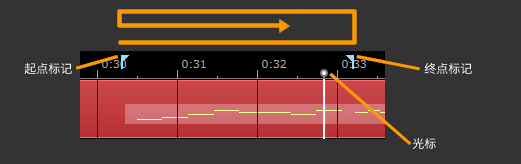
<style>
.page{position:relative;width:521px;height:164px;background:#333333}
.page>*{position:absolute;margin:0}
.t1{font:12px "Sarasa-Gothic-SC-Regular";color:#ffffff}
</style>
<div class="page">
<p class="t1" style="left:24px;top:63px;width:48px;height:11px">起点标记</p>
<p class="t1" style="left:424px;top:63px;width:48px;height:11px">终点标记</p>
<p class="t1" style="left:412px;top:138px;width:24px;height:11px">光标</p>
</div>
